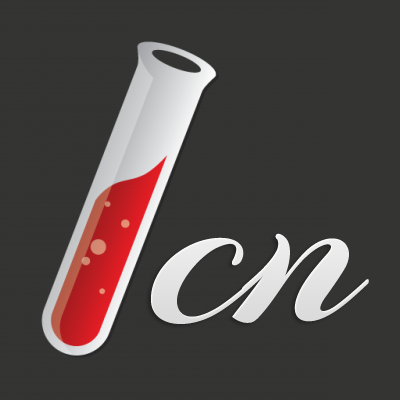
<style>
.page{position:relative;width:400px;height:400px;background:#343432}
.page>*{position:absolute;margin:0}
.t1{font:292px "Arizonia-Regular";letter-spacing:-0.01em;color:#e5e5e5}
</style>
<div class="page">
<p class="t1" style="left:151px;top:233px;width:218px;height:91px">cn</p>
</div>
